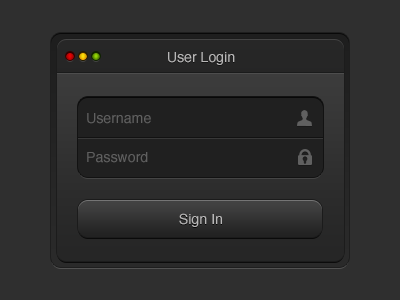
<style>
.page{position:relative;width:400px;height:300px;background:#2f2f2f}
.page>*{position:absolute;margin:0}
.t1{font:14px "Helvetica";color:#b8b7b7}
.t2{font:14px "Helvetica";color:#606060}
</style>
<div class="page">
<p class="t1" style="left:168px;top:52px;width:67px;height:13px">User Login</p>
<p class="t2" style="left:87px;top:113px;width:64px;height:11px">Username</p>
<p class="t2" style="left:87px;top:152px;width:61px;height:11px">Password</p>
<p class="t1" style="left:179px;top:213px;width:43px;height:14px">Sign In</p>
</div>
